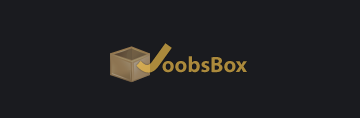
<style>
.page{position:relative;width:360px;height:118px;background:#1a1b1f}
.page>*{position:absolute;margin:0}
.t1{font:52.4px "MyriadPro-Bold";color:#ab8a3c}
.t2{font:22.1px "MyriadPro-Bold";color:#ab8a3c}
</style>
<div class="page">
<p class="t1" style="left:136px;top:43px;width:36px;height:30px;rotate:36deg">J</p>
<p class="t2" style="left:162px;top:56px;width:85px;height:17px">oobsBox</p>
</div>
